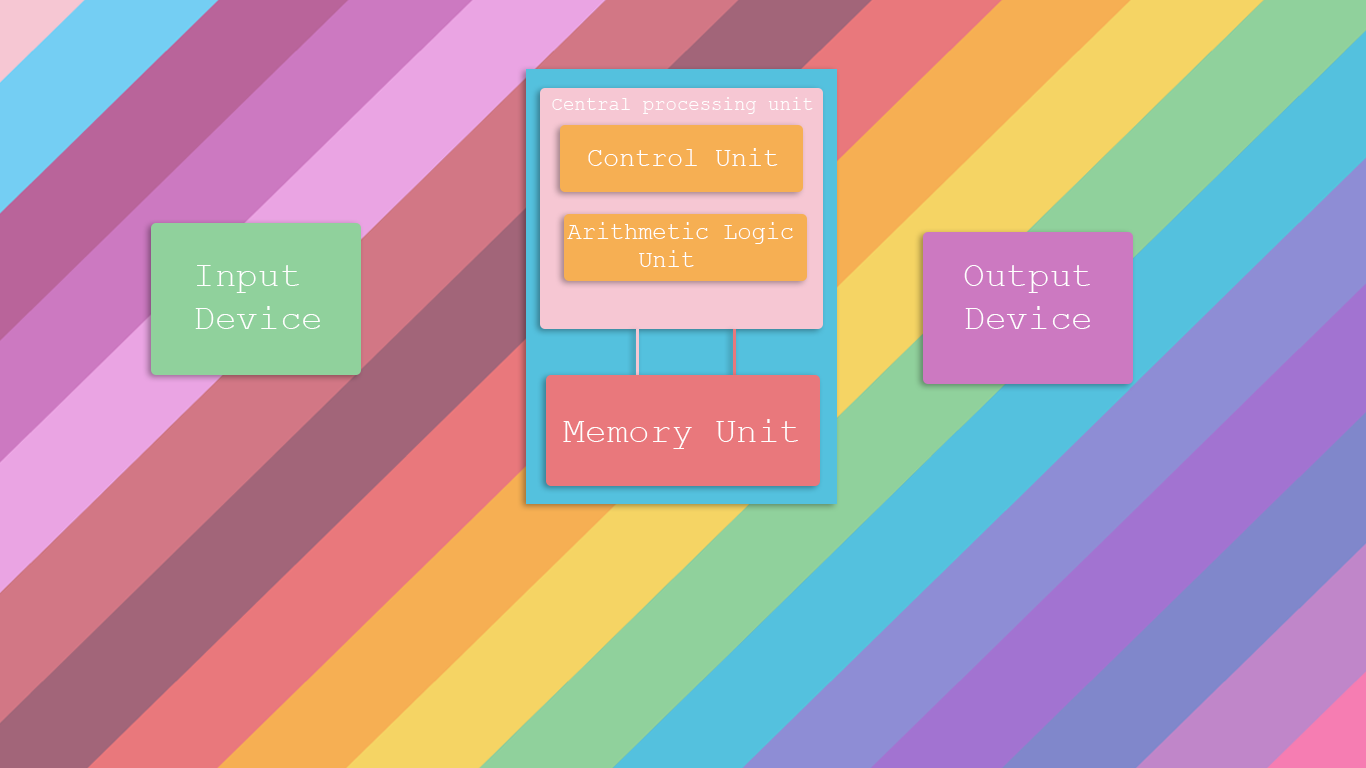
<style>
.page{position:relative;width:1366px;height:768px}
.page>*{position:absolute;margin:0}
.t1{font:19px "CourierNewPSMT";color:#ffffff}
.t2{font:26.6px "CourierNewPSMT";color:#ffffff}
.t3{font:23.6px "CourierNewPSMT";color:#ffffff}
.t4{font:36px "CourierNewPSMT";color:#ffffff}
</style>
<div class="page">
<p class="t1" style="left:552px;top:97px;width:261px;height:17px">Central processing unit</p>
<p class="t2" style="left:588px;top:148px;width:190px;height:18px">Control Unit</p>
<p class="t3" style="left:567px;top:222px;width:226px;height:45px">Arithmetic Logic <br>     Unit</p>
<p class="t4" style="left:195px;top:265px;width:125px;height:64px">Input<br>Device</p>
<p class="t4" style="left:964px;top:265px;width:126px;height:64px">Output<br>Device</p>
<p class="t4" style="left:563px;top:419px;width:235px;height:30px">Memory Unit</p>
</div>
